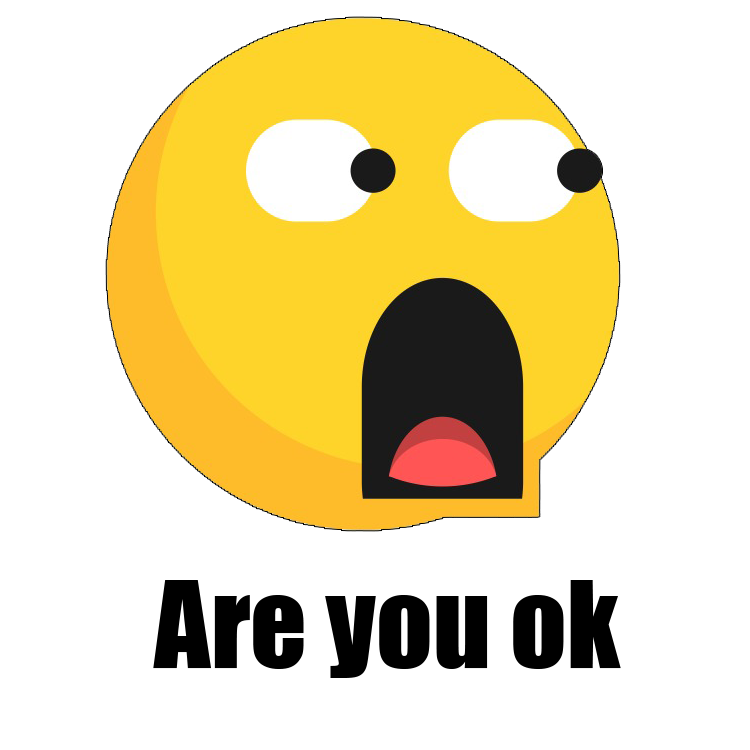
<style>
.page{position:relative;width:750px;height:750px;background:#ffffff}
.page>*{position:absolute;margin:0}
.t1{font:110.7px "Impact";color:#000000}
</style>
<div class="page">
<p class="t1" style="left:153px;top:580px;width:468px;height:98px">Are you ok</p>
</div>
